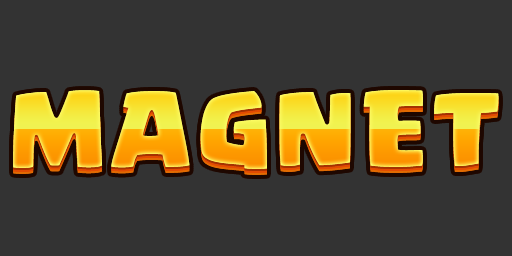
<style>
.page{position:relative;width:512px;height:256px;background:#333333}
.page>*{position:absolute;margin:0}
.t1{font:78.4px "Supercell-Magic";letter-spacing:0.06em}
</style>
<div class="page">
<p class="t1" style="left:13px;top:90px;width:486px;height:79px">MAGNET</p>
</div>
